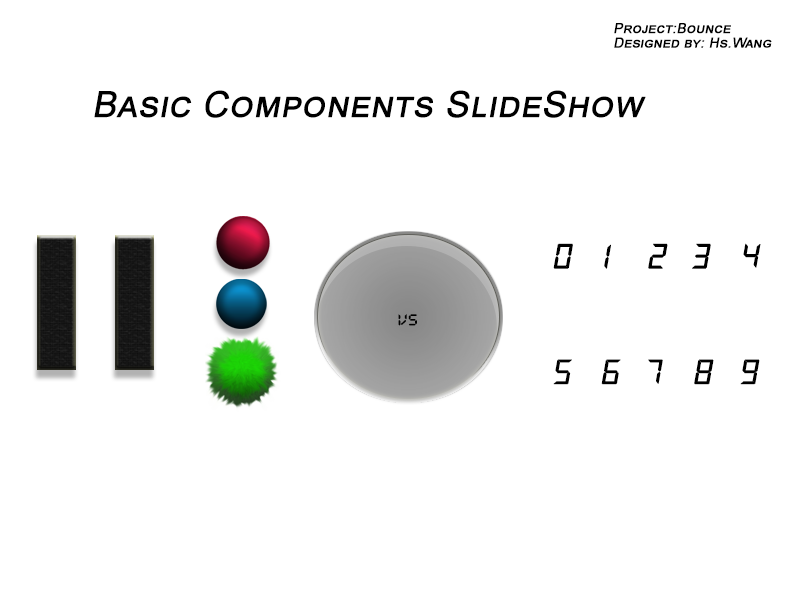
<style>
.page{position:relative;width:800px;height:600px;background:#ffffff}
.page>*{position:absolute;margin:0}
.t1{font:14px/7.2px "ArialMT";color:#000000;font-variant:small-caps;font-weight:bold;font-style:italic}
.t2{font:36px "ArialMT";color:#000000;font-variant:small-caps;font-weight:bold;font-style:italic}
.t3{font:37.9px "DS-Digital";color:#000000;font-variant:small-caps;font-weight:bold;font-style:italic}
.t4{font:17.9px "DS-Digital-Bold";color:#000000;text-transform:uppercase;scale:1.15 1}
</style>
<div class="page">
<p class="t1" style="left:614px;top:23px;width:158px;height:25px">Project:Bounce    <br><br>Designed by: Hs.Wang</p>
<p class="t2" style="left:94px;top:90px;width:552px;height:28px">Basic Components SlideShow</p>
<p class="t3" style="left:553px;top:243px;width:20px;height:26px">0</p>
<p class="t3" style="left:604px;top:244px;width:7px;height:25px">1</p>
<p class="t3" style="left:648px;top:243px;width:20px;height:26px">2</p>
<p class="t3" style="left:692px;top:243px;width:19px;height:26px">3</p>
<p class="t3" style="left:743px;top:243px;width:18px;height:25px">4</p>
<p class="t4" style="left:398px;top:314px;width:19px;height:12px">VS</p>
<p class="t3" style="left:553px;top:359px;width:19px;height:26px">5</p>
<p class="t3" style="left:601px;top:359px;width:20px;height:26px">6</p>
<p class="t3" style="left:648px;top:359px;width:15px;height:25px">7</p>
<p class="t3" style="left:694px;top:359px;width:20px;height:26px">8</p>
<p class="t3" style="left:740px;top:359px;width:20px;height:26px">9</p>
</div>
